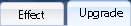
<style>
.page{position:relative;width:131px;height:26px;background:#f6f6f6}
.page>*{position:absolute;margin:0}
.t1{font:12px "MyriadPro-Regular";color:#000000}
</style>
<div class="page">
<p class="t1" style="left:19px;top:10px;width:25px;height:9px">Effect</p>
<p class="t1" style="left:80px;top:8px;width:43px;height:11px">Upgrade</p>
</div>
